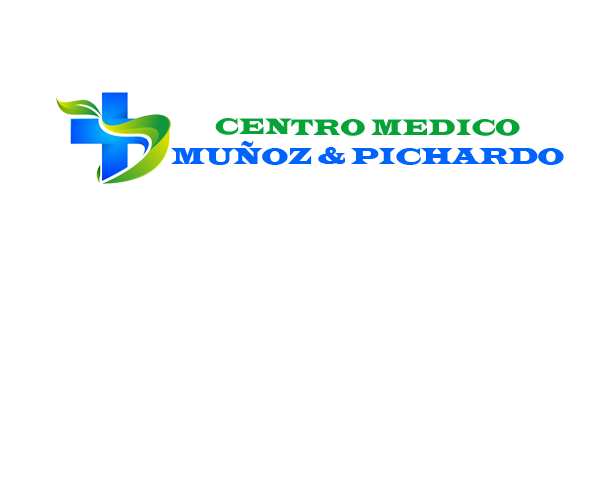
<style>
.page{position:relative;width:598px;height:477px;background:#ffffff}
.page>*{position:absolute;margin:0}
.t1{font:23.3px "LatinWide";color:#06a337;scale:0.79 1}
.t2{font:24px "LatinWide";color:#0163fd;scale:0.82 1}
</style>
<div class="page">
<p class="t1" style="left:215px;top:118px;width:305px;height:18px">CENTRO MEDICO</p>
<p class="t2" style="left:171px;top:141px;width:393px;height:24px">MUÑOZ &amp; PICHARDO</p>
</div>
